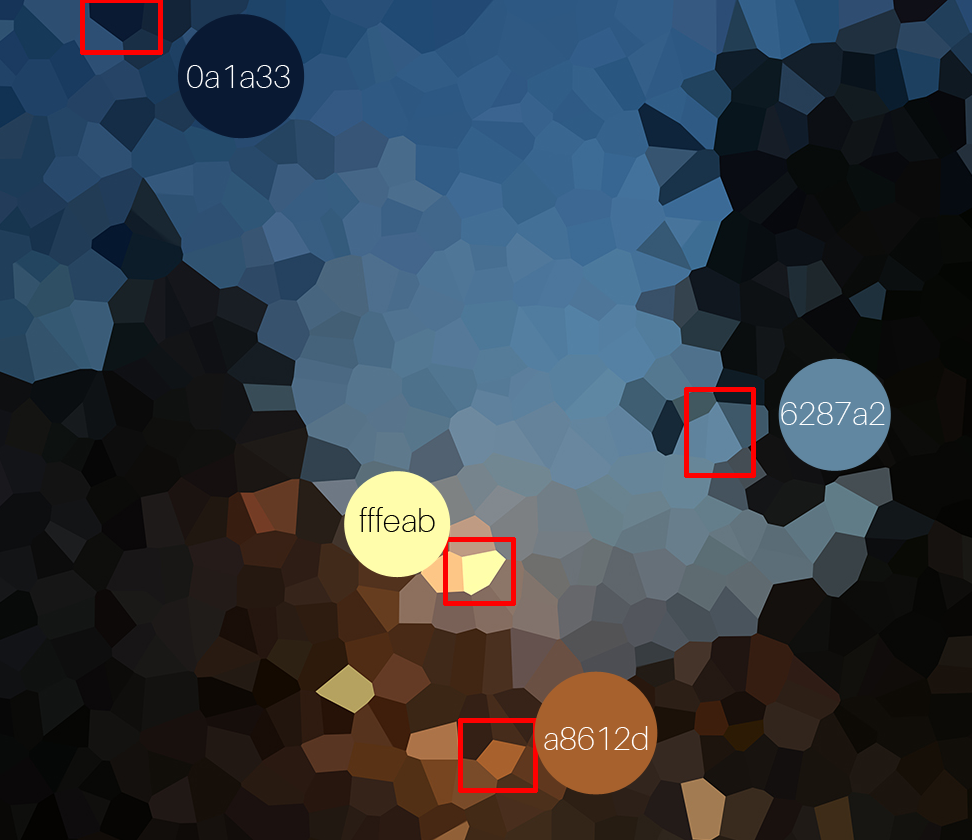
<style>
.page{position:relative;width:972px;height:840px}
.page>*{position:absolute;margin:0}
.t1{font:32.9px "Aileron-Thin";color:#ffffff}
.t2{font:32.9px "Aileron-Thin";color:#000000}
</style>
<div class="page">
<p class="t1" style="left:187px;top:65px;width:103px;height:23px">0a1a33</p>
<p class="t1" style="left:781px;top:402px;width:104px;height:23px">6287a2</p>
<p class="t2" style="left:359px;top:507px;width:76px;height:25px">fffeab</p>
<p class="t1" style="left:544px;top:726px;width:104px;height:24px">a8612d</p>
</div>
